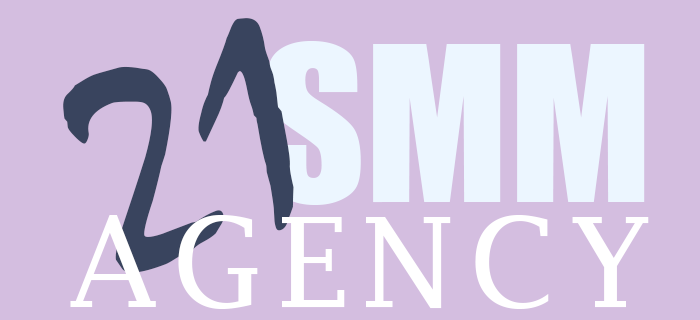
<style>
.page{position:relative;width:700px;height:320px;background:#d4bee0}
.page>*{position:absolute;margin:0}
.t1{font:300px "Mistral";color:#39445e}
.t2{font:200px "Impact";color:#ecf6ff}
.t3{font:125px "LucidaFax";letter-spacing:0.1em;color:#ffffff}
</style>
<div class="page">
<p class="t1" style="left:63px;top:18px;width:231px;height:255px;rotate:-21deg">21</p>
<p class="t2" style="left:266px;top:41px;width:379px;height:164px">SMM</p>
<p class="t3" style="left:70px;top:215px;width:579px;height:94px">AGENCY</p>
</div>
